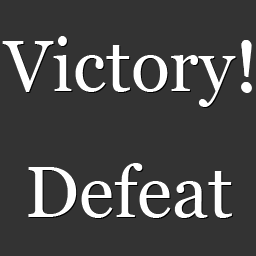
<style>
.page{position:relative;width:256px;height:256px;background:#333333}
.page>*{position:absolute;margin:0}
.t1{font:72px "Georgia";color:#ffffff}
.t2{font:72px "Georgia";color:#fefefe}
</style>
<div class="page">
<p class="t1" style="left:2px;top:36px;width:249px;height:71px">Victory!</p>
<p class="t2" style="left:28px;top:163px;width:204px;height:55px">Defeat</p>
</div>
